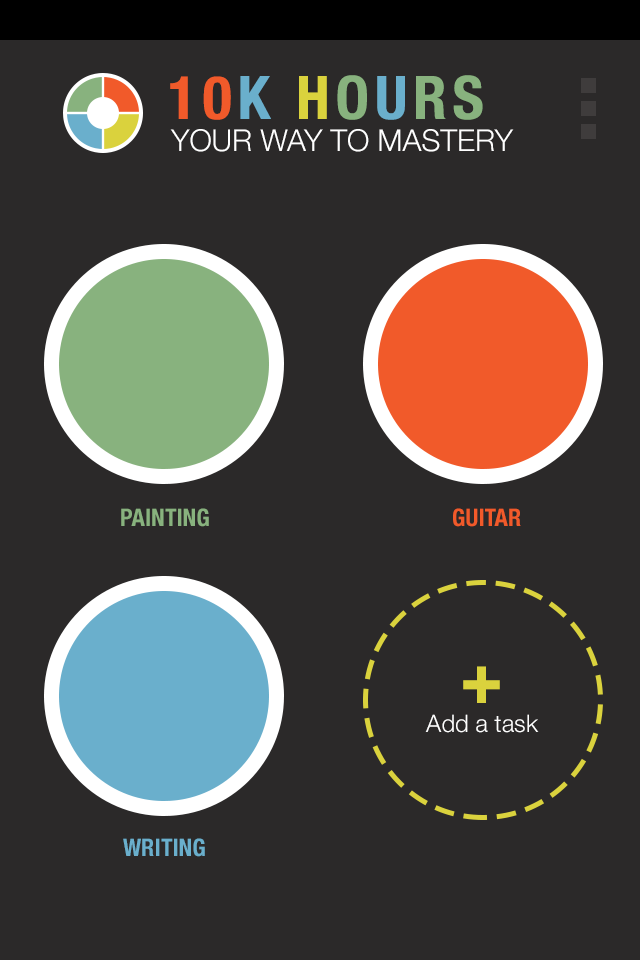
<style>
.page{position:relative;width:640px;height:960px;background:#2b2929}
.page>*{position:absolute;margin:0}
.t1{font:60px "HelveticaNeue-CondensedBold";letter-spacing:0.1em;color:#f15a2a}
.t2{font:60px "HelveticaNeue-CondensedBold";letter-spacing:0.1em;color:#6aafcc}
.t3{font:60px "HelveticaNeue-CondensedBold";letter-spacing:0.1em;color:#dad23d}
.t4{font:60px "HelveticaNeue-CondensedBold";letter-spacing:0.1em;color:#88b27e}
.t5{font:30px "HelveticaNeue-Light";color:#ffffff}
.t6{font:24px "HelveticaNeue-CondensedBold";color:#88b27e}
.t7{font:24px "HelveticaNeue-CondensedBold";color:#f15a2a}
.t8{font:24px "HelveticaNeue-Light";color:#ffffff}
.t9{font:72px "HelveticaNeue-CondensedBold";color:#dad23d}
.t10{font:24px "HelveticaNeue-CondensedBold";color:#6aafcc}
</style>
<div class="page">
<p class="t1" style="left:170px;top:75px;width:313px;height:45px">10<span class="t2">K </span><span class="t3">H</span><span class="t4">O</span><span class="t2">U</span><span class="t4">RS</span></p>
<p class="t5" style="left:170px;top:129px;width:344px;height:23px">YOUR WAY TO MASTERY</p>
<p class="t6" style="left:121px;top:508px;width:88px;height:19px">PAINTING</p>
<p class="t7" style="left:453px;top:508px;width:68px;height:19px">GUITAR</p>
<p class="t8" style="left:425px;top:666px;width:114px;height:67px;text-align:center"><span class="t9">+<br></span>Add a task</p>
<p class="t10" style="left:123px;top:838px;width:82px;height:19px">WRITING</p>
</div>
